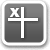
<style>
.page{position:relative;width:50px;height:50px;background:#ffffff}
.page>*{position:absolute;margin:0}
.t1{font:18px "FranklinGothic-Heavy";color:#ffffff}
</style>
<div class="page">
<p class="t1" style="left:9px;top:8px;width:11px;height:9px">x</p>
</div>
